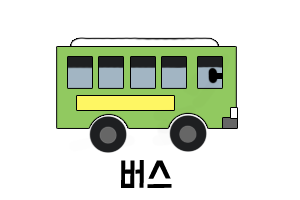
<style>
.page{position:relative;width:300px;height:200px;background:#ffffff}
.page>*{position:absolute;margin:0}
.t1{font:29.2px "BMDoHyeon";color:#000000;scale:0.96 1}
</style>
<div class="page">
<p class="t1" style="left:121px;top:160px;width:51px;height:28px">버스</p>
</div>
